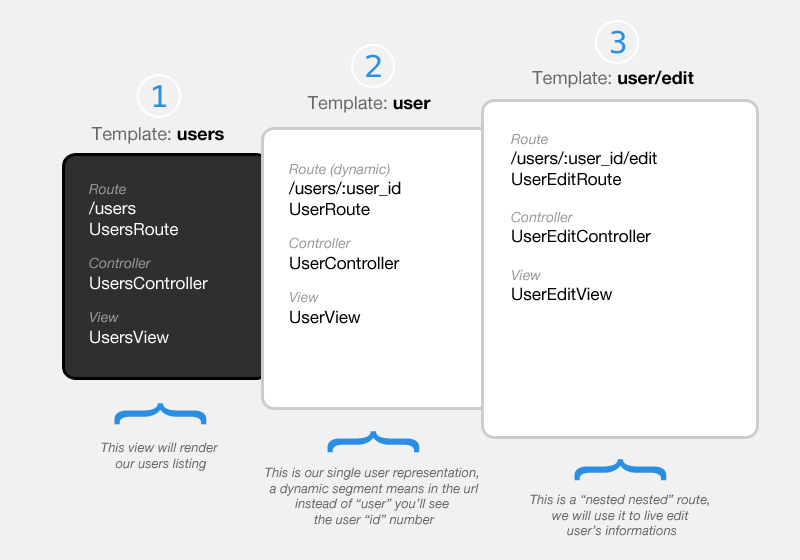
<style>
.page{position:relative;width:800px;height:560px;background:#f1f1f1}
.page>*{position:absolute;margin:0}
.t1{font:30px "Menlo-Regular";color:#298ee4}
.t2{font:18px "HelveticaNeue";color:#666666}
.t3{font:18px "HelveticaNeue-Bold";color:#000000}
.t4{font:18px "HelveticaNeue-Bold";color:#010101}
.t5{font:17px "HelveticaNeue";color:#000000}
.t6{font:14px "HelveticaNeue-Italic";color:#999999}
.t7{font:17px "HelveticaNeue";color:#ffffff}
.t8{font:100px "HelveticaNeue-Light";color:#298ee4}
.t9{font:13px "HelveticaNeue-Italic";color:#666666}
</style>
<div class="page">
<p class="t1" style="left:611px;top:30px;width:15px;height:24px">3</p>
<p class="t1" style="left:366px;top:54px;width:15px;height:23px">2</p>
<p class="t2" style="left:532px;top:70px;width:162px;height:18px">Template: <span class="t3">user/edit</span></p>
<p class="t1" style="left:153px;top:85px;width:13px;height:22px">1</p>
<p class="t2" style="left:307px;top:96px;width:124px;height:17px">Template: <span class="t4">user</span></p>
<p class="t2" style="left:91px;top:127px;width:133px;height:17px">Template: <span class="t3">users</span></p>
<p class="t5" style="left:510px;top:134px;width:147px;height:167px"><span class="t6">Route<br></span>/users/:user_id/edit<br>UserEditRoute<br><br><span class="t6">Controller</span><br>UserEditController<br><br><span class="t6">View<br></span>UserEditView</p>
<p class="t5" style="left:288px;top:163px;width:113px;height:161px"><span class="t6">Route (dynamic) <br></span>/users/:user_id<br>UserRoute<br><span class="t6"><br>Controller <br></span>UserController<br><span class="t6"><br>View <br></span>UserView</p>
<p class="t7" style="left:88px;top:184px;width:120px;height:160px"><span class="t6">Route <br></span>/users<br>UsersRoute<br><br><span class="t6">Controller <br></span>UsersController<br><span class="t6"><br>View<br></span>UsersView</p>
<p class="t8" style="left:114px;top:403px;width:93px;height:22px;rotate:90deg">{</p>
<p class="t8" style="left:327px;top:431px;width:93px;height:22px;rotate:90deg">{</p>
<p class="t9" style="left:101px;top:442px;width:118px;height:29px;text-align:center">This view will render <br>our users listing</p>
<p class="t8" style="left:574px;top:459px;width:93px;height:22px;rotate:90deg">{</p>
<p class="t9" style="left:265px;top:467px;width:214px;height:58px;text-align:center">This is our single user representation, <br>a dynamic segment means in the url<br>instead of “user” you’ll see <br>the user “id” number</p>
<p class="t9" style="left:530px;top:494px;width:179px;height:42px;text-align:center">This is a “nested nested” route, <br>we will use it to live edit <br>user’s informations</p>
</div>
